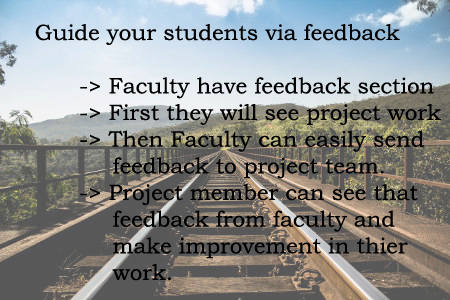
<style>
.page{position:relative;width:450px;height:300px}
.page>*{position:absolute;margin:0}
.t1{font:22.2px "BookmanOldStyle";color:#000000}
</style>
<div class="page">
<p class="t1" style="left:35px;top:24px;width:406px;height:257px">Guide your students via feedback<br><br>    -&gt; Faculty have feedback section<br>    -&gt; First they will see project work<br>    -&gt; Then Faculty can easily send<br>       feedback to project team.<br>    -&gt; Project member can see that<br>       feedback from faculty and<br>       make improvement in thier<br>       work.</p>
</div>
